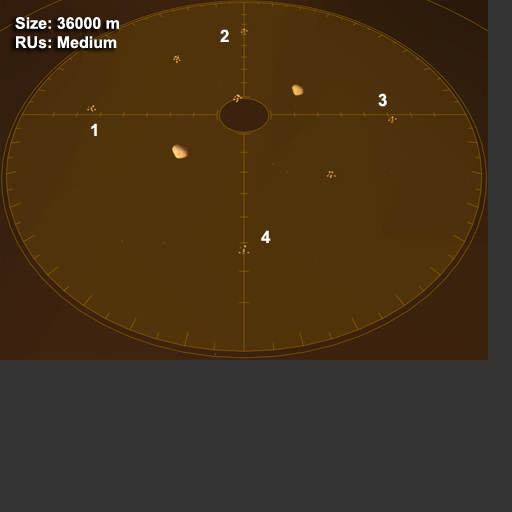
<style>
.page{position:relative;width:512px;height:512px;background:#333333}
.page>*{position:absolute;margin:0}
.t1{font:16px "Arial-BoldMT";color:#ffffff}
.t2{font:17px "Arial-BoldMT";color:#ffffff}
</style>
<div class="page">
<p class="t1" style="left:15px;top:17px;width:104px;height:32px">Size: 36000 m<br>RUs: Medium</p>
<p class="t2" style="left:220px;top:29px;width:9px;height:13px">2</p>
<p class="t2" style="left:378px;top:93px;width:9px;height:14px">3</p>
<p class="t2" style="left:91px;top:123px;width:6px;height:13px">1</p>
<p class="t2" style="left:261px;top:230px;width:10px;height:13px">4</p>
</div>
